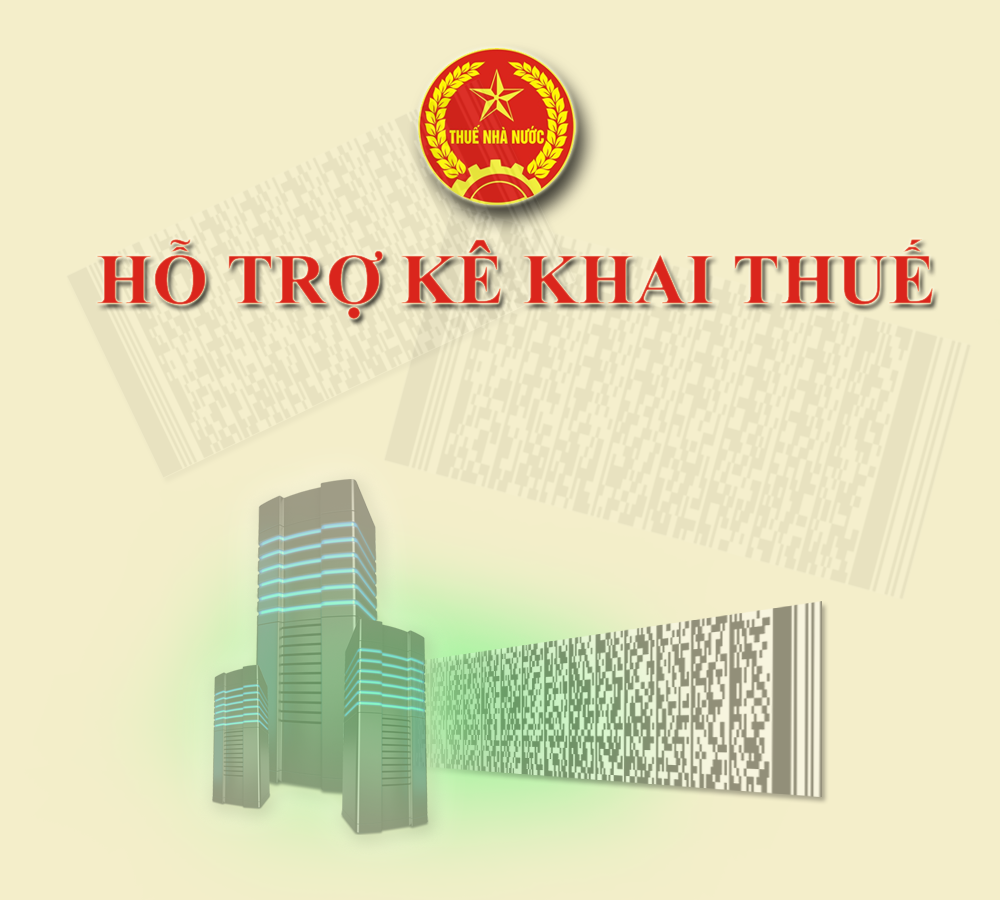
<style>
.page{position:relative;width:1000px;height:900px;background:#f4eeca}
.page>*{position:absolute;margin:0}
.t1{font:72px "TimesNewRomanPS-BoldMT";color:#da251c}
</style>
<div class="page">
<p class="t1" style="left:97px;top:239px;width:836px;height:80px">HỖ TRỢ KÊ KHAI THUẾ</p>
</div>
